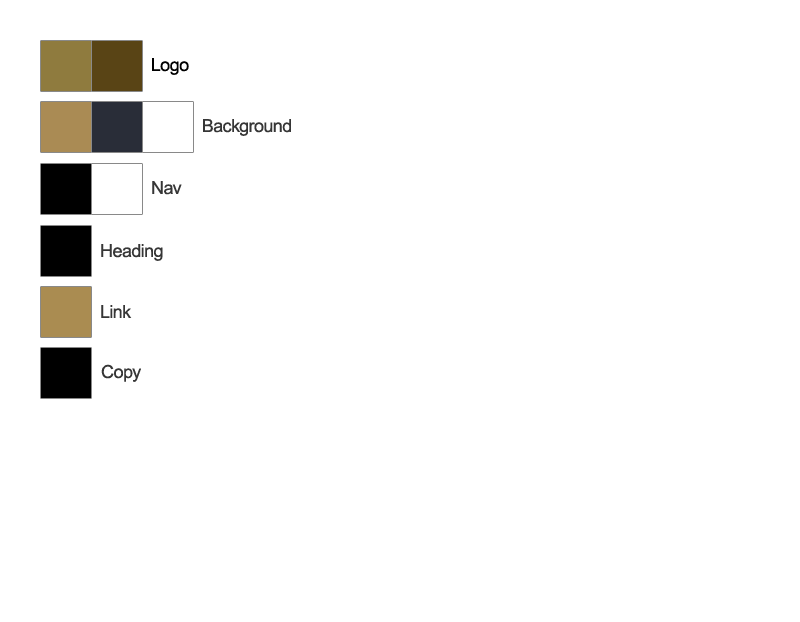
<style>
.page{position:relative;width:800px;height:622px;background:#ffffff}
.page>*{position:absolute;margin:0}
.t1{font:18px "ArialMT";letter-spacing:-0.025em;color:#000000}
.t2{font:18px "ArialMT";letter-spacing:-0.025em;color:#363636}
</style>
<div class="page">
<p class="t1" style="left:152px;top:58px;width:37px;height:17px">Logo</p>
<p class="t2" style="left:203px;top:119px;width:88px;height:17px">Background</p>
<p class="t2" style="left:152px;top:181px;width:30px;height:14px">Nav</p>
<p class="t2" style="left:101px;top:244px;width:62px;height:17px">Heading</p>
<p class="t2" style="left:101px;top:305px;width:31px;height:13px">Link</p>
<p class="t2" style="left:101px;top:364px;width:40px;height:18px">Copy</p>
</div>
